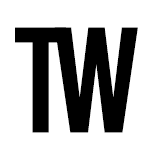
<style>
.page{position:relative;width:159px;height:159px;background:#ffffff}
.page>*{position:absolute;margin:0}
.t1{font:150px "Bebas-Regular";color:#000000}
</style>
<div class="page">
<p class="t1" style="left:15px;top:27px;width:51px;height:106px">T</p>
<p class="t1" style="left:54px;top:27px;width:84px;height:106px">w</p>
</div>
